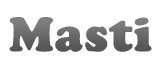
<style>
.page{position:relative;width:158px;height:69px;background:#ffffff}
.page>*{position:absolute;margin:0}
.t1{font:50px "CooperBlack";letter-spacing:0.02em;color:#676767}
</style>
<div class="page">
<p class="t1" style="left:9px;top:17px;width:143px;height:35px">Masti</p>
</div>
